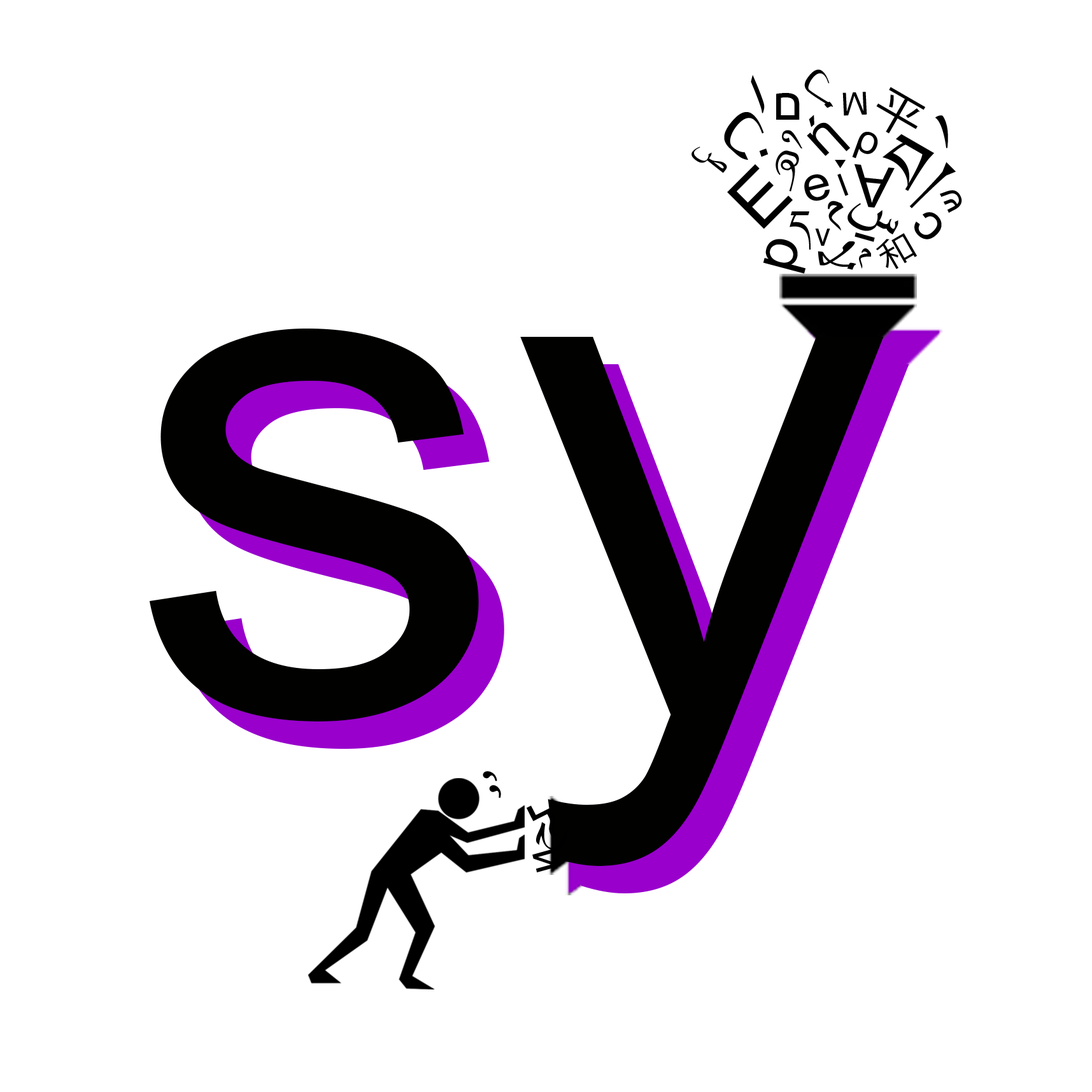
<style>
.page{position:relative;width:1092px;height:1092px;background:#ffffff}
.page>*{position:absolute;margin:0}
.t1{font:64.6px "ArialMT";color:#000000;scale:1.14 1}
.t2{font:49.9px "ArialMT";color:#000000;scale:1.05 1}
.t3{font:47.6px "KozGoPr6N-Regular";color:#000000;scale:1.05 1}
.t4{font:49.5px "ArialMT";color:#000000;scale:1.03 1}
.t5{font:31.8px "ArialMT";color:#000000;scale:1.05 1}
.t6{font:77.5px "ArialMT";color:#000000;scale:1.06 1}
.t7{font:53.2px "ArialMT";color:#000000;scale:1.05 1}
.t8{font:72.6px "Kailasa";color:#000000;scale:1.05 1}
.t9{font:48.6px "Kailasa";color:#000000}
.t10{font:40.4px "ArialMT";color:#000000}
.t11{font:87.1px "Kailasa";color:#000000;scale:1.05 1}
.t12{font:32.3px "ArialMT";color:#000000;scale:1.08 1}
.t13{font:72.6px "ArialMT";color:#000000;scale:1.05 1}
.t14{font:48.4px "ArialMT";color:#000000;scale:1.05 1}
.t15{font:43.4px "ArialMT";color:#000000;scale:0.84 1}
.t16{font:57.7px "ArialMT";color:#000000;scale:1.04 1}
.t17{font:33.2px "ArialMT";color:#000000;scale:1.05 1}
.t18{font:58.1px "ArialMT";color:#000000;scale:1.05 1}
.t19{font:48.4px "Kailasa";color:#000000;scale:1.05 1}
.t20{font:50.5px "ArialMT";color:#000000;scale:1.06 1}
.t21{font:32.3px "ArialMT";color:#000000;scale:0.95 1}
.t22{font:37.9px "ArialMT";color:#000000;scale:1.18 1}
.t23{font:33.4px "KozGoPr6N-Regular";color:#000000;scale:1.1 1}
.t24{font:59px "ArialMT";color:#000000;scale:1.04 1}
.t25{font:36.6px "ArialMT";color:#000000}
.t26{font:725.9px "ArialMT";color:#010100;scale:1.05 1}
.t27{font:725.9px "ArialMT";scale:1.05 1}
.t28{font:50.7px "ArialMT";color:#000000}
.t29{font:49.8px "ArialMT";color:#000000}
.t30{font:53.8px "ArialMT";color:#000000}
.t31{font:45.2px "ArialMT";color:#000000;scale:1.1 1}
.t32{font:39.4px "ArialMT";color:#000000;scale:1.09 1}
</style>
<div class="page">
<p class="t1" style="left:751px;top:74px;width:14px;height:39px;rotate:-15deg">ا</p>
<p class="t2" style="left:804px;top:69px;width:29px;height:39px;rotate:131deg">ل</p>
<p class="t3" style="left:876px;top:87px;width:50px;height:47px;rotate:30deg">平</p>
<p class="t4" style="left:776px;top:93px;width:24px;height:27px">ם</p>
<p class="t5" style="left:842px;top:92px;width:25px;height:24px;rotate:177deg">М</p>
<p class="t6" style="left:724px;top:112px;width:45px;height:48px;rotate:132deg">ن</p>
<p class="t7" style="left:807px;top:115px;width:43px;height:41px;rotate:-42deg">ή</p>
<p class="t8" style="left:909px;top:115px;width:47px;height:93px;rotate:45deg">ེ།</p>
<p class="t9" style="left:776px;top:130px;width:26px;height:62px;rotate:15deg">ཞི</p>
<p class="t10" style="left:852px;top:132px;width:26px;height:27px;rotate:21deg">ρ</p>
<p class="t11" style="left:883px;top:134px;width:51px;height:57px;rotate:30deg">བ</p>
<p class="t12" style="left:691px;top:146px;width:36px;height:27px;rotate:38deg">ص</p>
<p class="t8" style="left:835px;top:160px;width:11px;height:9px">་</p>
<p class="t13" style="left:727px;top:164px;width:66px;height:65px;rotate:-45deg">E</p>
<p class="t14" style="left:804px;top:174px;width:26px;height:27px;rotate:-14deg">e</p>
<p class="t15" style="left:837px;top:173px;width:12px;height:23px;rotate:-21deg">ι</p>
<p class="t16" style="left:854px;top:164px;width:41px;height:44px;rotate:-174deg">A</p>
<p class="t17" style="left:940px;top:190px;width:22px;height:23px;rotate:-115deg">ש</p>
<p class="t7" style="left:828px;top:201px;width:16px;height:30px;rotate:-30deg">م</p>
<p class="t18" style="left:847px;top:203px;width:51px;height:32px;rotate:30deg">س</p>
<p class="t19" style="left:790px;top:211px;width:21px;height:39px">ད</p>
<p class="t20" style="left:914px;top:212px;width:28px;height:27px;rotate:-135deg">c</p>
<p class="t21" style="left:815px;top:229px;width:15px;height:17px">ν</p>
<p class="t22" style="left:854px;top:232px;width:21px;height:10px;rotate:-76deg">ו</p>
<p class="t23" style="left:875px;top:233px;width:42px;height:36px;rotate:-30deg">和</p>
<p class="t24" style="left:763px;top:239px;width:43px;height:35px;rotate:-75deg">p</p>
<p class="t18" style="left:818px;top:241px;width:38px;height:29px;rotate:88deg">لا</p>
<p class="t25" style="left:859px;top:248px;width:12px;height:21px">م</p>
<p class="t26" style="left:149px;top:329px;width:735px;height:537px">sy</p>
<p class="t27" style="left:174px;top:356px;width:735px;height:537px">sy</p>
<p class="t28" style="left:483px;top:771px;width:14px;height:10px;rotate:119deg">،</p>
<p class="t29" style="left:489px;top:785px;width:12px;height:13px;rotate:143deg">،</p>
<p class="t30" style="left:526px;top:805px;width:31px;height:33px;rotate:-27deg">ל</p>
<p class="t31" style="left:536px;top:822px;width:32px;height:29px;rotate:-72deg">ح</p>
<p class="t32" style="left:532px;top:849px;width:25px;height:23px;rotate:76deg">и</p>
</div>
